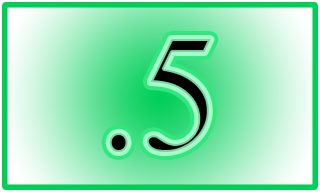
<style>
.page{position:relative;width:320px;height:192px}
.page>*{position:absolute;margin:0}
.t1{font:166.7px "TimesNewRomanPSMT"}
</style>
<div class="page">
<p class="t1" style="left:109px;top:39px;width:102px;height:113px">.5</p>
</div>
